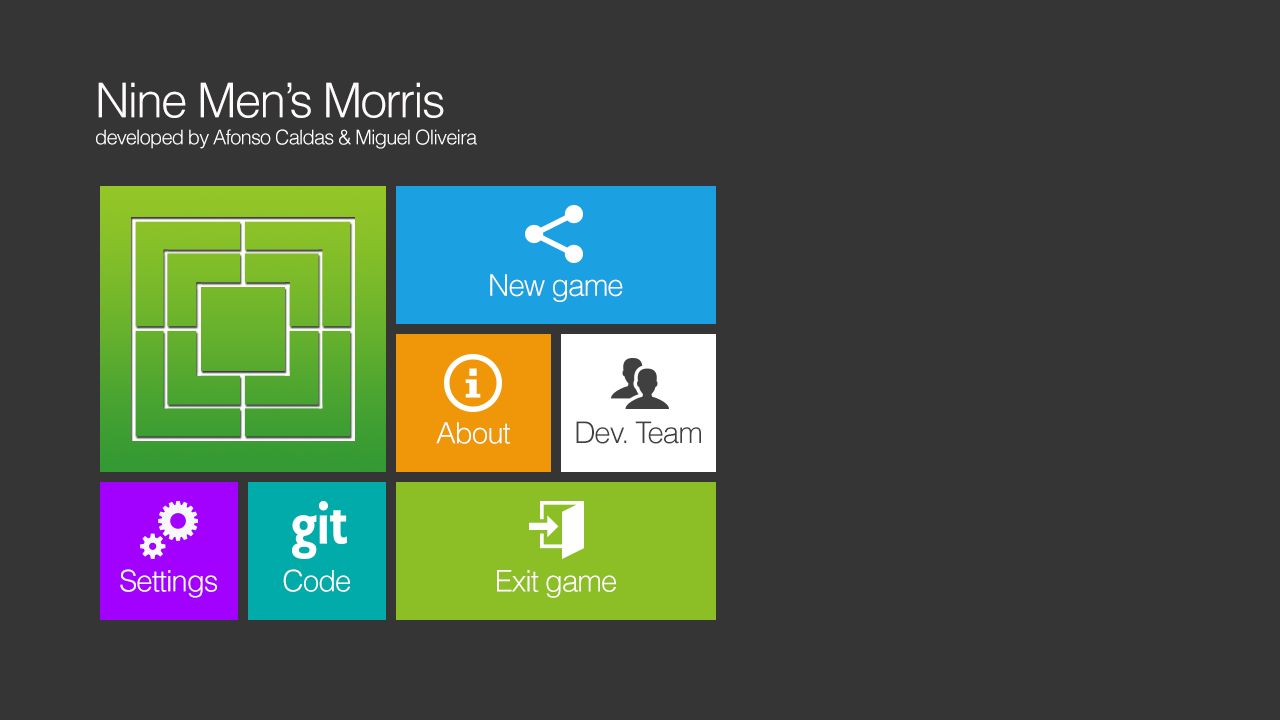
<style>
.page{position:relative;width:1280px;height:720px;background:#353535}
.page>*{position:absolute;margin:0}
.t1{font:48px "Helvetica-Light";letter-spacing:-0.04em;color:#fffbfb}
.t2{font:20px "Helvetica-Light";letter-spacing:-0.04em;color:#ffffff}
.t3{font:29.9px "Helvetica-Light";letter-spacing:-0.04em;color:#fffbfb}
.t4{font:29.4px "Helvetica-Light";letter-spacing:-0.04em;color:#ffffff}
.t5{font:29.7px "Helvetica-Light";letter-spacing:-0.04em;color:#404040}
.t6{font:29.5px "Helvetica-Light";letter-spacing:-0.04em;color:#fffbfb}
</style>
<div class="page">
<p class="t1" style="left:98px;top:82px;width:346px;height:36px">Nine Men’s Morris</p>
<p class="t2" style="left:96px;top:129px;width:381px;height:20px">developed by Afonso Caldas &amp; Miguel Oliveira</p>
<p class="t3" style="left:490px;top:274px;width:133px;height:28px">New game</p>
<p class="t4" style="left:436px;top:422px;width:74px;height:22px">About</p>
<p class="t5" style="left:576px;top:421px;width:125px;height:23px">Dev. Team</p>
<p class="t6" style="left:120px;top:569px;width:97px;height:29px">Settings</p>
<p class="t6" style="left:283px;top:569px;width:67px;height:23px">Code</p>
<p class="t3" style="left:497px;top:570px;width:119px;height:28px">Exit game</p>
</div>
